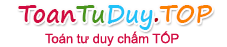
<style>
.page{position:relative;width:227px;height:47px;background:#ffffff}
.page>*{position:absolute;margin:0}
.t1{font:24px "SegoePrint-Bold";color:#d10b40}
.t2{font:24px "SegoePrint-Bold";color:#49951c}
.t3{font:24px "SegoePrint-Bold";color:#21c2f8}
.t4{font:24px "SegoePrint-Bold";color:#ab0010}
.t5{font:24px "SegoePrint-Bold";color:#fb7f01}
.t6{font:13px "ArialMT";color:#d10b40}
</style>
<div class="page">
<p class="t1" style="left:18px;top:5px;width:194px;height:25px">Toan<span class="t2">Tu</span><span class="t3">Duy</span><span class="t4">.</span><span class="t5">TOP</span></p>
<p class="t6" style="left:45px;top:31px;width:134px;height:15px">Toán tư duy chấm TỐP</p>
</div>
